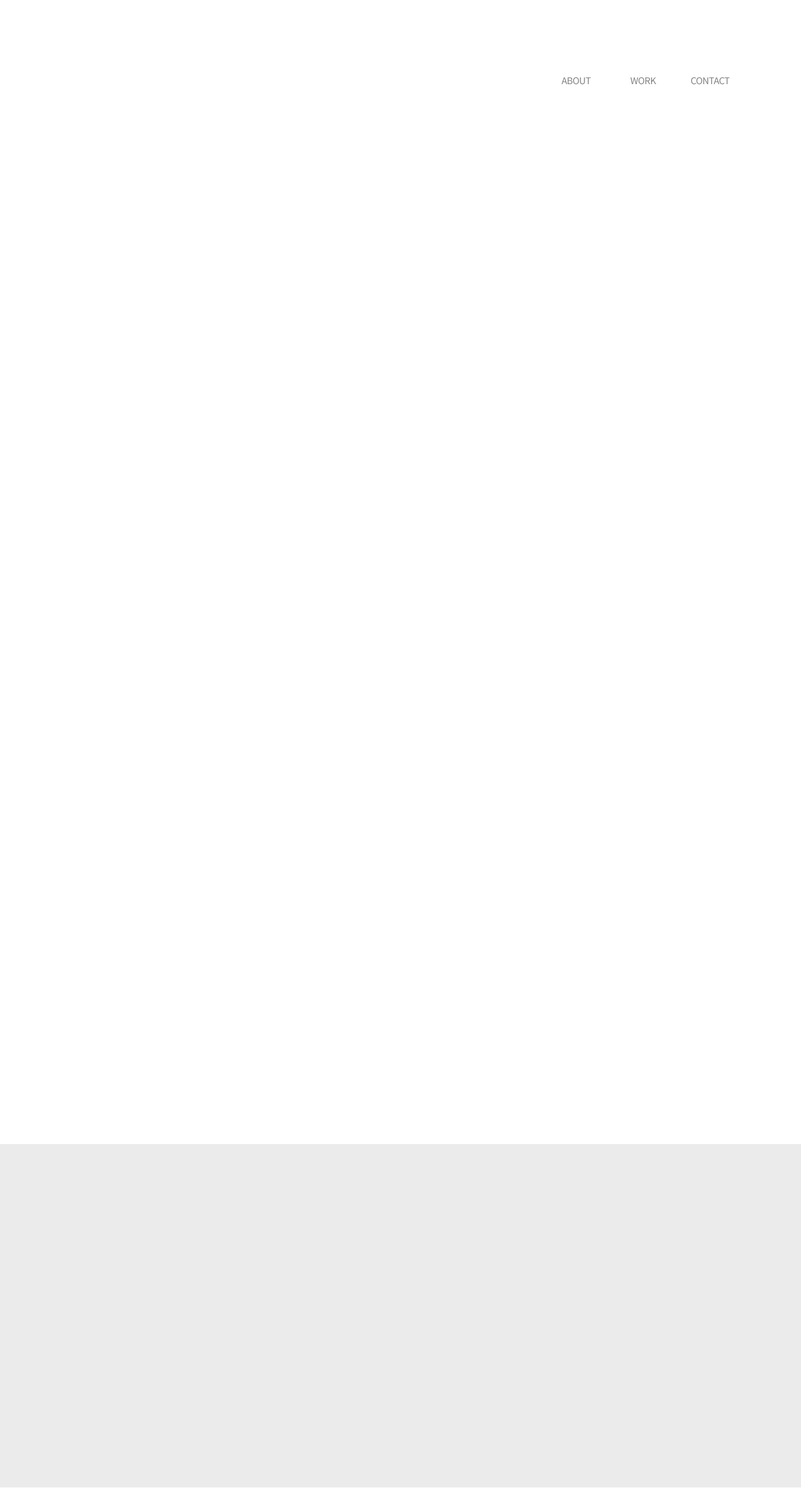
<style>
.page{position:relative;width:801px;height:1488px;background:#ffffff}
.page>*{position:absolute;margin:0}
.t1{font:10.3px "SourceSansPro-Regular";letter-spacing:-0.02em;color:#828282;text-transform:uppercase}
</style>
<div class="page">
<p class="t1" style="left:561px;top:77px;width:169px;height:8px">about                     work               contact</p>
</div>
